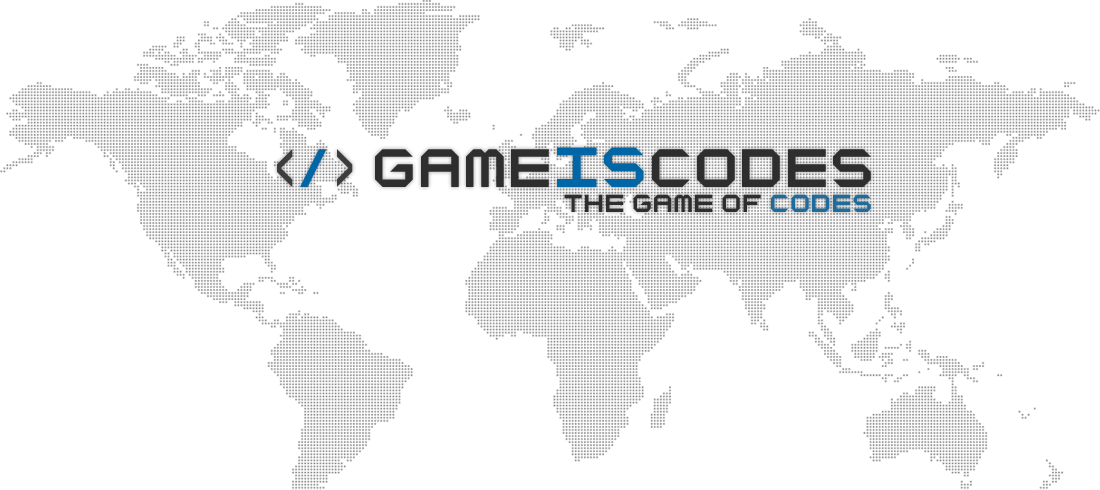
<style>
.page{position:relative;width:1100px;height:490px;background:#ffffff}
.page>*{position:absolute;margin:0}
.t1{font:60.6px "Octapost-NBP";color:#2f2e2e}
.t2{font:63.3px "Octapost-NBP";color:#0066a6}
.t3{font:60.6px "Octapost-NBP";color:#3d3d3d}
.t4{font:60.6px "Octapost-NBP";color:#0066a6}
.t5{font:27.5px "Octapost-NBP";color:#2f2e2e}
.t6{font:27.5px "Octapost-NBP";color:#1e6c9d}
</style>
<div class="page">
<p class="t1" style="left:277px;top:147px;width:594px;height:40px">game<span class="t2">is</span>codes <span class="t3">&lt;</span><span class="t4">/</span><span class="t3">&gt;</span></p>
<p class="t5" style="left:564px;top:194px;width:307px;height:18px">the game of <span class="t6">codes</span></p>
</div>
